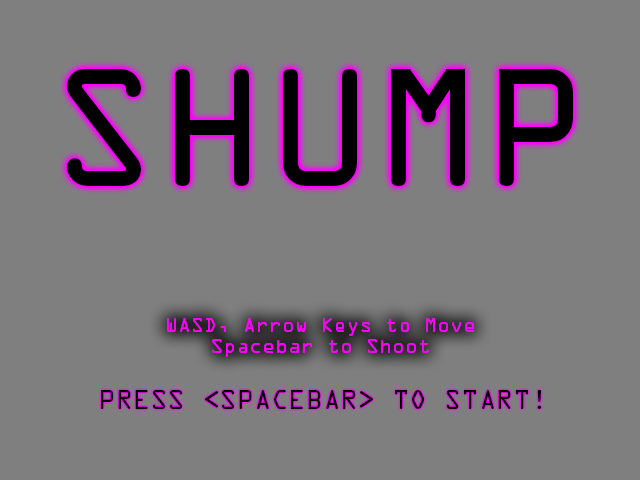
<style>
.page{position:relative;width:640px;height:480px;background:#7f7f7f}
.page>*{position:absolute;margin:0}
.t1{font:150px "OCRAStd";color:#000000}
.t2{font:18px "OCRAStd";color:#ff00ff}
.t3{font:24px "OCRAStd";color:#000000}
</style>
<div class="page">
<p class="t1" style="left:67px;top:68px;width:506px;height:118px">SHUMP</p>
<p class="t2" style="left:167px;top:318px;width:307px;height:39px;text-align:center">WASD, Arrow Keys to Move<br>Spacebar to Shoot</p>
<p class="t3" style="left:101px;top:390px;width:440px;height:19px">PRESS &lt;SPACEBAR&gt; TO START!</p>
</div>
